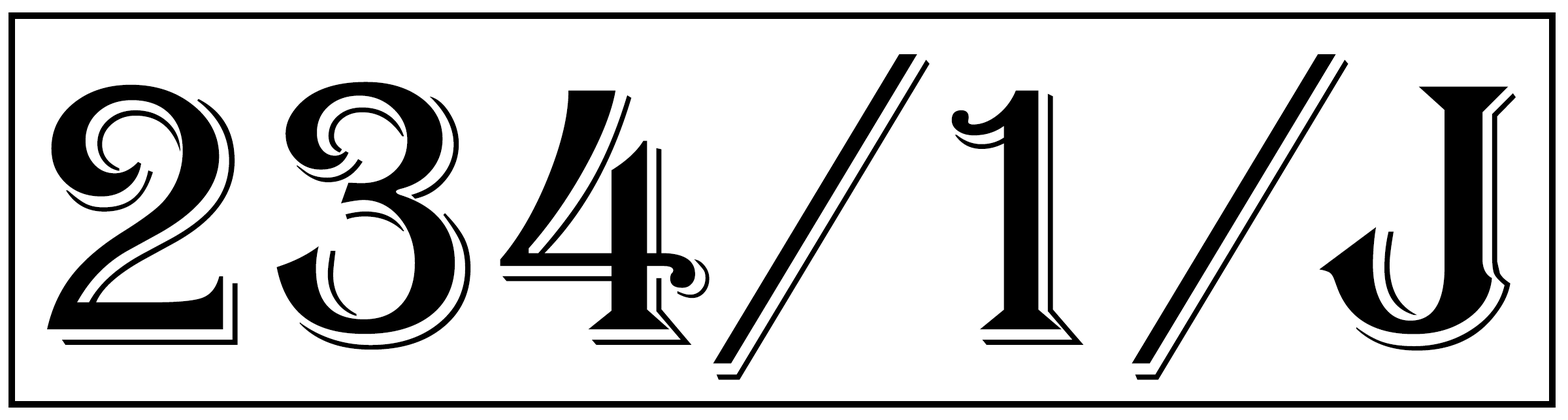
<style>
.page{position:relative;width:1568px;height:420px;background:#ffffff}
.page>*{position:absolute;margin:0}
.t1{font:387.5px "Algerian";color:#000000;text-transform:uppercase}
</style>
<div class="page">
<p class="t1" style="left:47px;top:54px;width:1469px;height:326px">234/1/j</p>
</div>
